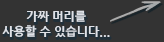
<style>
.page{position:relative;width:164px;height:42px;background:#333333}
.page>*{position:absolute;margin:0}
.t1{font:12px/15px "NanumGothicExtraBold";color:#dee1e7}
</style>
<div class="page">
<p class="t1" style="left:2px;top:10px;width:108px;height:27px;text-align:center">가짜 머리를<br>사용할 수 있습니다...</p>
</div>
